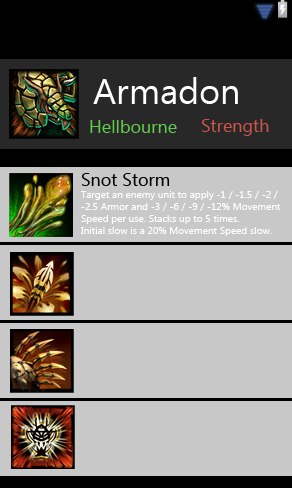
<style>
.page{position:relative;width:292px;height:488px;background:#c8c8c8}
.page>*{position:absolute;margin:0}
.t1{font:36px "Ebrima";color:#ffffff}
.t2{font:18px "Ebrima";color:#62cd4c}
.t3{font:18px "Ebrima";color:#cd554c}
.t4{font:18px "Ebrima";color:#000000}
.t5{font:10px "Ebrima";color:#ffffff}
</style>
<div class="page">
<p class="t1" style="left:93px;top:77px;width:145px;height:27px">Armadon</p>
<p class="t2" style="left:90px;top:120px;width:87px;height:13px">Hellbourne</p>
<p class="t3" style="left:201px;top:119px;width:68px;height:17px">Strength</p>
<p class="t4" style="left:81px;top:173px;width:89px;height:13px">Snot Storm</p>
<p class="t5" style="left:81px;top:191px;width:200px;height:45px">Target an enemy unit to apply -1 / -1.5 / -2 / <br>-2.5 Armor and -3 / -6 / -9 / -12% Movement <br>Speed per use. Stacks up to 5 times. <br>Initial slow is a 20% Movement Speed slow.</p>
</div>
